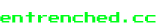
<style>
.page{position:relative;width:157px;height:23px;background:#ffffff}
.page>*{position:absolute;margin:0}
.t1{font:12px "PressStart2P";letter-spacing:0.005em;color:#00ff1a}
</style>
<div class="page">
<p class="t1" style="left:0px;top:12px;width:156px;height:11px">entrenched.cc</p>
</div>
